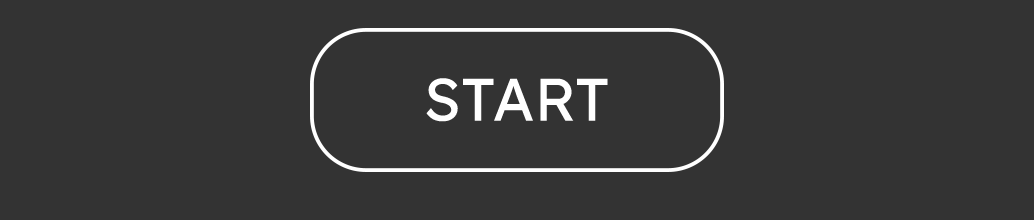
<style>
.page{position:relative;width:1034px;height:220px;background:#333333}
.page>*{position:absolute;margin:0}
.t1{font:60px "Lexend-Regular";color:#ffffff}
</style>
<div class="page">
<p class="t1" style="left:426px;top:78px;width:182px;height:44px">START</p>
</div>
